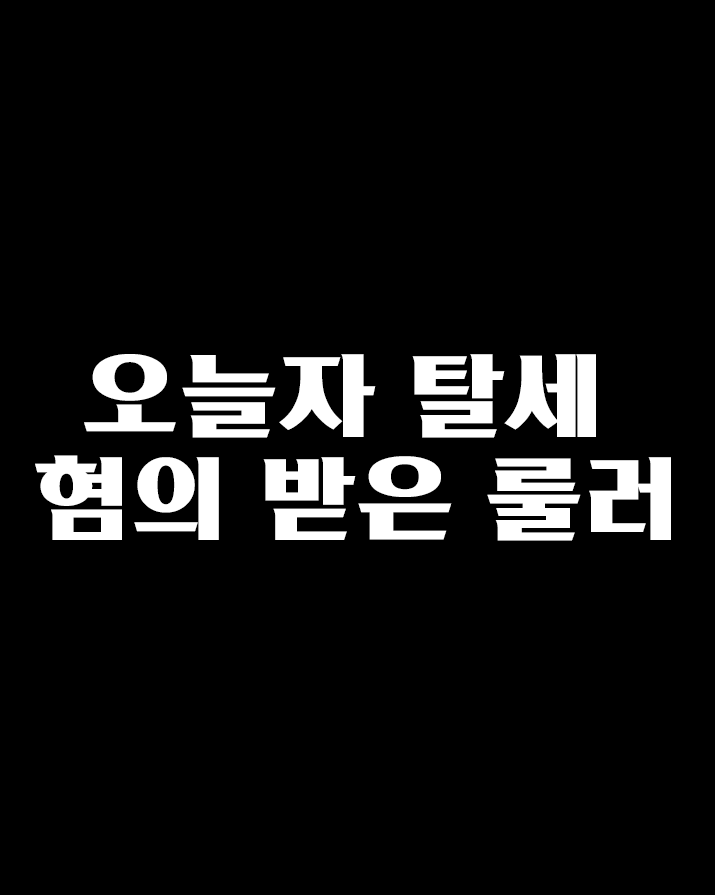
<style>
.page{position:relative;width:715px;height:895px;background:#000000}
.page>*{position:absolute;margin:0}
.t1{font:95.7px/102.3px "KoreanATST-B";letter-spacing:0.025em;color:#ffffff}
</style>
<div class="page">
<p class="t1" style="left:35px;top:354px;width:636px;height:187px;text-align:center">오늘자 탈세 <br>혐의 받은 룰러</p>
</div>
